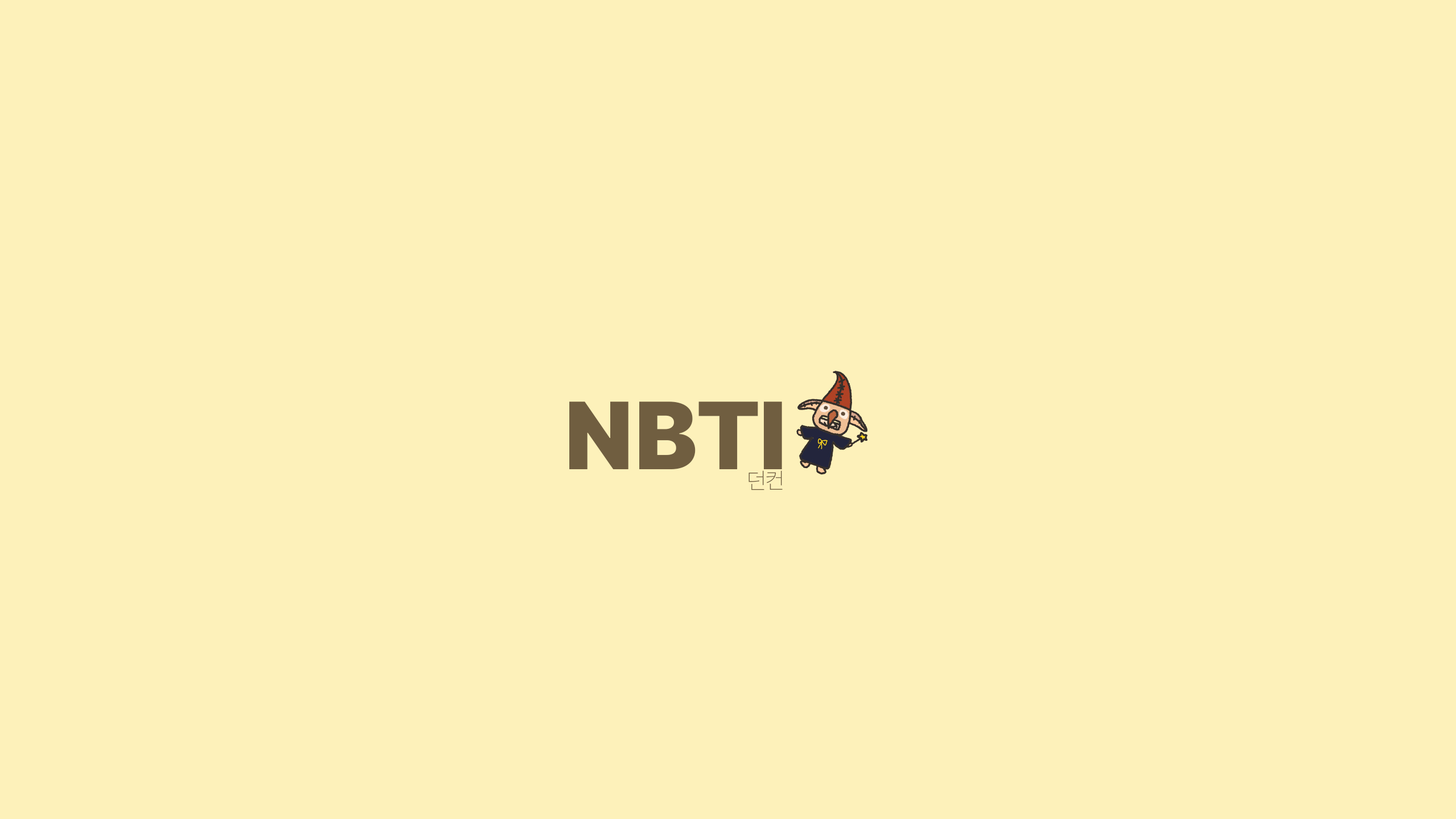
<style>
.page{position:relative;width:1456px;height:819px;background:#fdf1ba}
.page>*{position:absolute;margin:0}
.t1{font:95.6px "Pretendard-Black";letter-spacing:0.002em;color:#705e40}
.t2{font:22.7px "Pretendard-Thin";letter-spacing:0.002em;color:#705e40}
</style>
<div class="page">
<p class="t1" style="left:569px;top:402px;width:213px;height:67px">NBTI</p>
<p class="t2" style="left:748px;top:470px;width:35px;height:20px">던컨</p>
</div>
